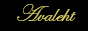
<style>
.page{position:relative;width:88px;height:31px;background:#000000}
.page>*{position:absolute;margin:0}
.t1{font:24px "EdwardianScriptITC";color:#cfc864}
</style>
<div class="page">
<p class="t1" style="left:17px;top:4px;width:59px;height:17px">Avaleht</p>
</div>
